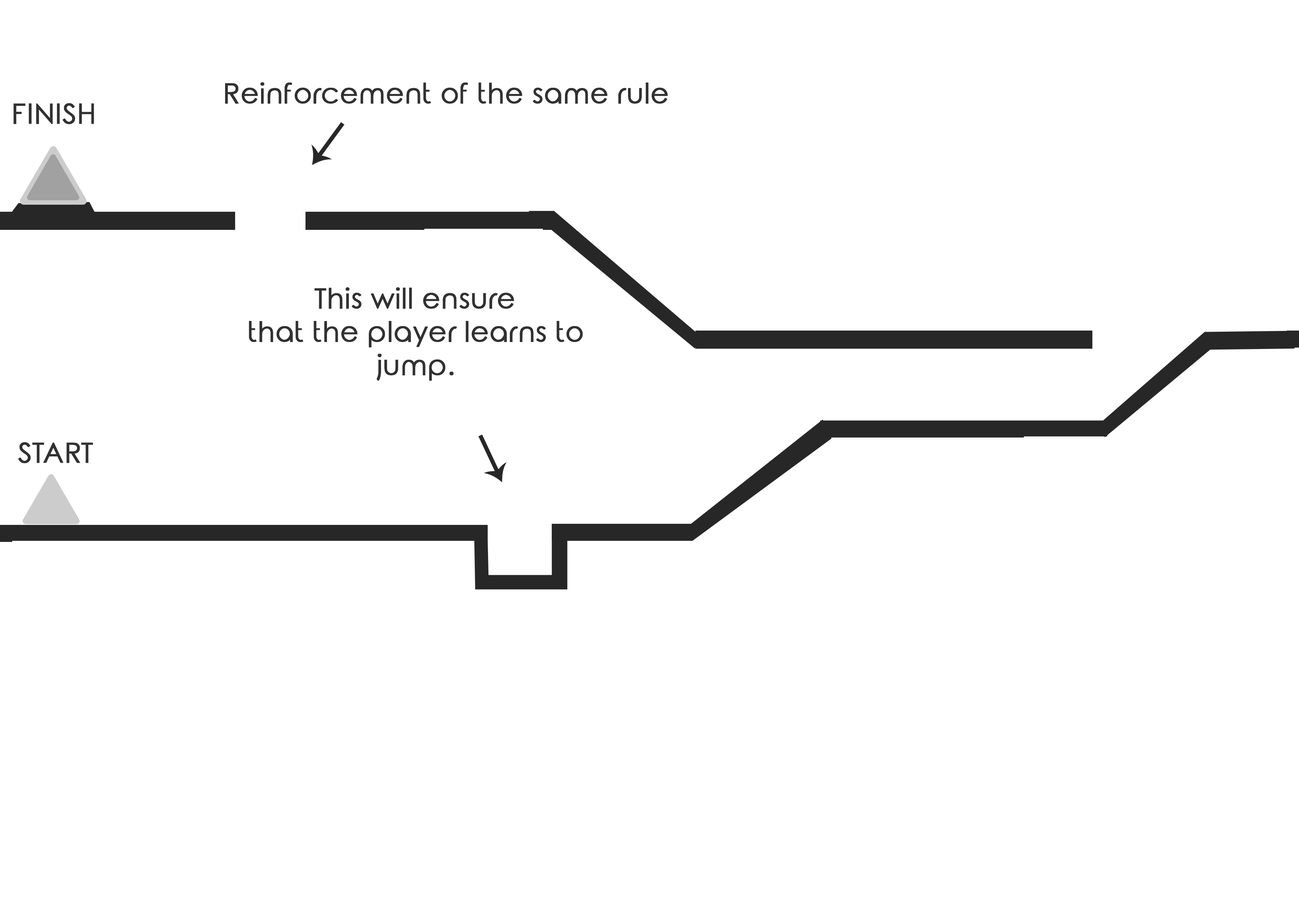
<style>
.page{position:relative;width:1299px;height:918px;background:#ffffff}
.page>*{position:absolute;margin:0}
.t1{font:27.8px "RoundedElegance-Regular";color:#313131;font-weight:bold}
</style>
<div class="page">
<p class="t1" style="left:225px;top:82px;width:443px;height:22px">Reinforcement of the same rule</p>
<p class="t1" style="left:13px;top:103px;width:81px;height:21px">FINISH</p>
<p class="t1" style="left:249px;top:287px;width:334px;height:94px;text-align:center">This will ensure<br>that the player learns to<br>jump.</p>
<p class="t1" style="left:18px;top:442px;width:75px;height:22px">START</p>
</div>
